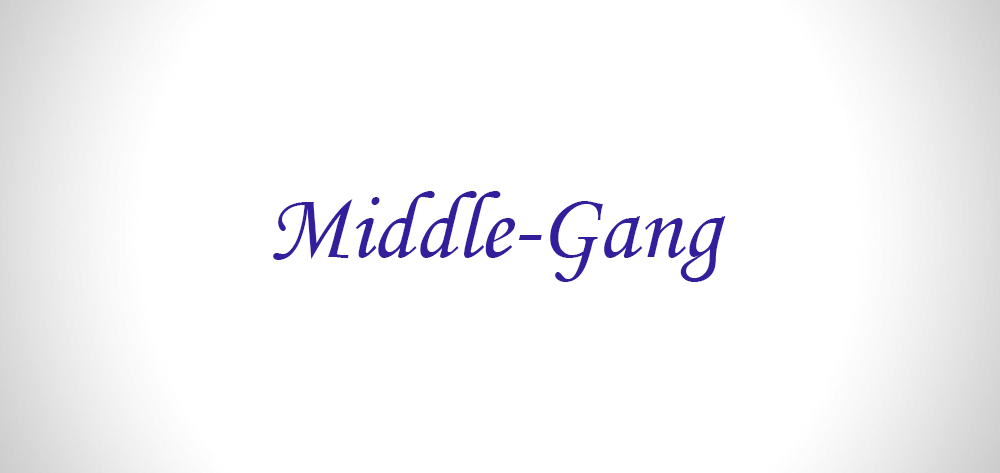
<style>
.page{position:relative;width:1000px;height:473px;background:#ffffff}
.page>*{position:absolute;margin:0}
.t1{font:96px "MonotypeCorsiva";color:#331e9c}
</style>
<div class="page">
<p class="t1" style="left:273px;top:191px;width:453px;height:91px">Middle-Gang</p>
</div>
